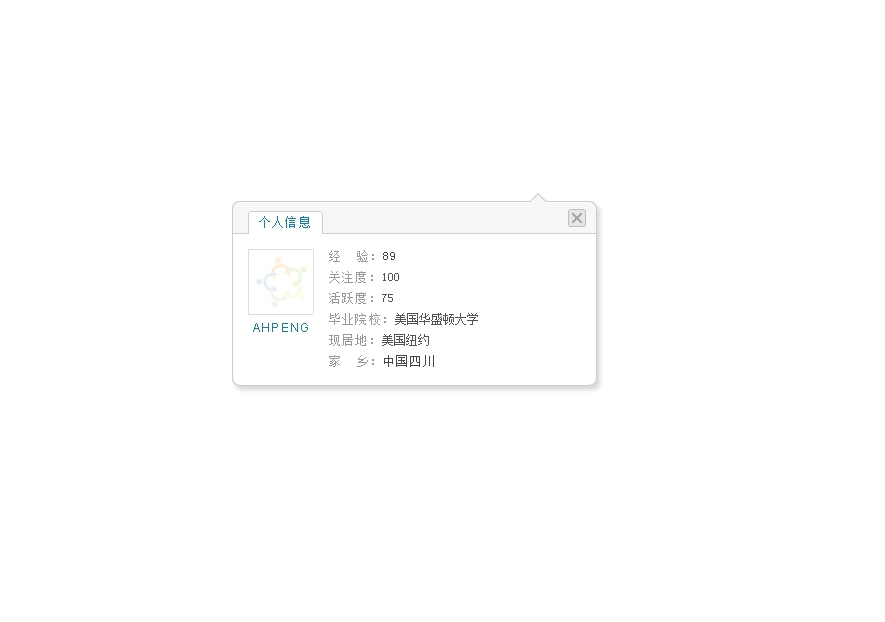
<style>
.page{position:relative;width:885px;height:622px;background:#ffffff}
.page>*{position:absolute;margin:0}
.t1{font:12px "SimSun";letter-spacing:0.1em;color:#137fa5}
.t2{font:12px/21px "SimSun";color:#525252}
.t3{font:12px/21px "SimSun";letter-spacing:0.1em;color:#999999}
.t4{font:12px/21px "SimSun";letter-spacing:0.1em;color:#464646}
.t5{font:12px "ArialMT";letter-spacing:0.1em;color:#137fa5}
</style>
<div class="page">
<p class="t1" style="left:259px;top:216px;width:51px;height:12px">个人信息</p>
<p class="t2" style="left:329px;top:250px;width:149px;height:117px"><span class="t3">经  验：</span><span class="t4">89<br></span><span class="t3">关注度：</span>100<br><span class="t3">活跃度：</span>75<br><span class="t3">毕业院校：</span>美国华盛顿大学<br><span class="t3">现居地：</span>美国纽约<br><span class="t3">家  乡：</span><span class="t4">中国四川</span></p>
<p class="t5" style="left:253px;top:323px;width:55px;height:9px">AHPENG</p>
</div>
